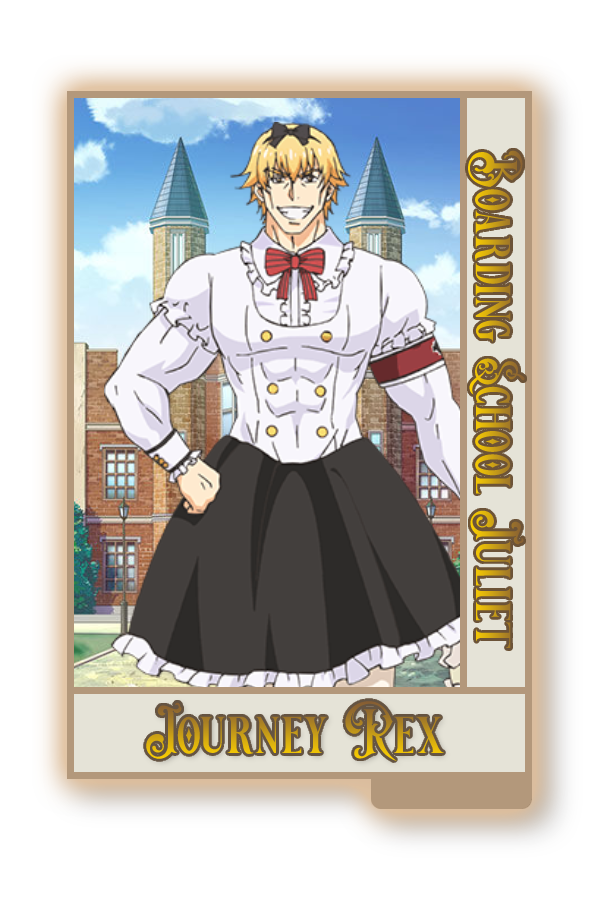
<style>
.page{position:relative;width:600px;height:900px;background:#ffffff}
.page>*{position:absolute;margin:0}
.t1{font:58.9px "VictorianDecadeDemoVersion"}
.t2{font:62.3px "VictorianDecadeDemoVersion"}
</style>
<div class="page">
<p class="t1" style="left:468px;top:150px;width:57px;height:498px;rotate:90deg">Boarding School Juliet</p>
<p class="t2" style="left:145px;top:701px;width:299px;height:61px">Journey Rex</p>
</div>
